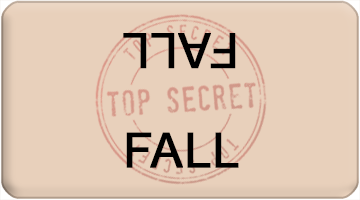
<style>
.page{position:relative;width:360px;height:200px;background:#e8d0bb}
.page>*{position:absolute;margin:0}
.t1{font:48px "ArialMT";color:#000000;font-weight:bold}
</style>
<div class="page">
<p class="t1" style="left:123px;top:33px;width:113px;height:36px;rotate:180deg">FALL</p>
<p class="t1" style="left:126px;top:132px;width:113px;height:36px">FALL</p>
</div>
